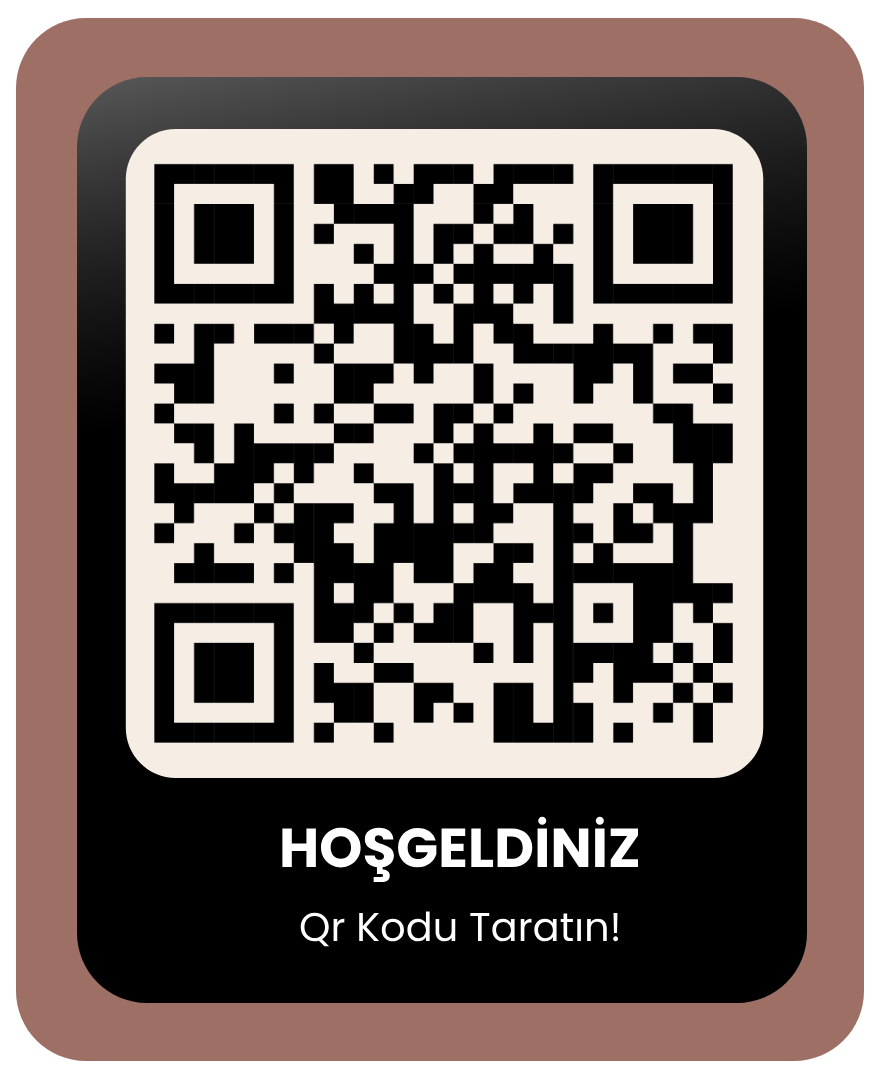
<style>
.page{position:relative;width:880px;height:1080px;background:#000000}
.page>*{position:absolute;margin:0}
.t1{font:55px "Poppins-Bold";color:#ffffff}
.t2{font:40px "Poppins-Regular";color:#ffffff}
</style>
<div class="page">
<p class="t1" style="left:282px;top:816px;width:356px;height:67px">HOŞGELDİNİZ</p>
<p class="t2" style="left:300px;top:911px;width:319px;height:36px">Qr Kodu Taratın!</p>
</div>
